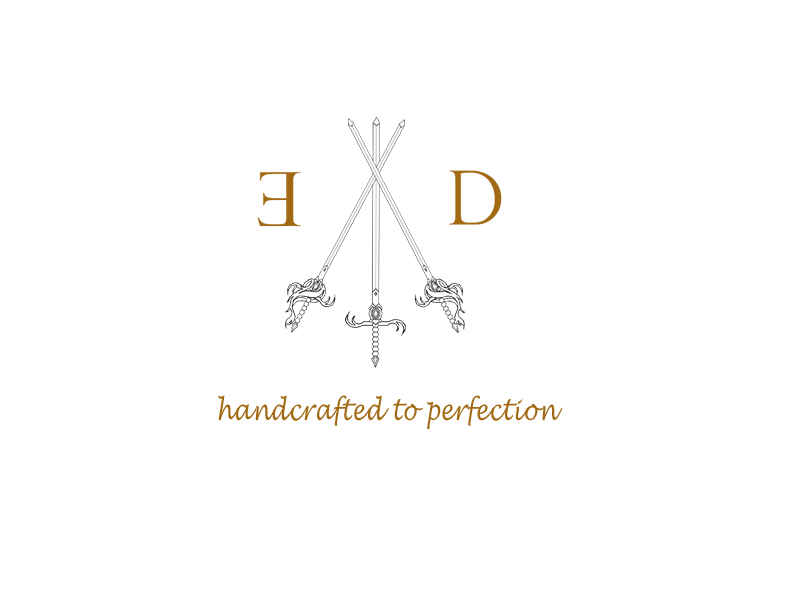
<style>
.page{position:relative;width:800px;height:600px;background:#ffffff}
.page>*{position:absolute;margin:0}
.t1{font:28.4px "LucidaHandwriting-Italic";letter-spacing:0.03em;color:#a26a15;scale:0.78 1}
</style>
<div class="page">
<p class="t1" style="left:218px;top:395px;width:345px;height:35px">handcrafted to perfection</p>
</div>
